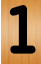
<style>
.page{position:relative;width:41px;height:64px;background:#000000}
.page>*{position:absolute;margin:0}
.t1{font:60px "YentiEG-Ultra-GB";color:#000000}
</style>
<div class="page">
<p class="t1" style="left:10px;top:5px;width:26px;height:49px">1</p>
</div>
